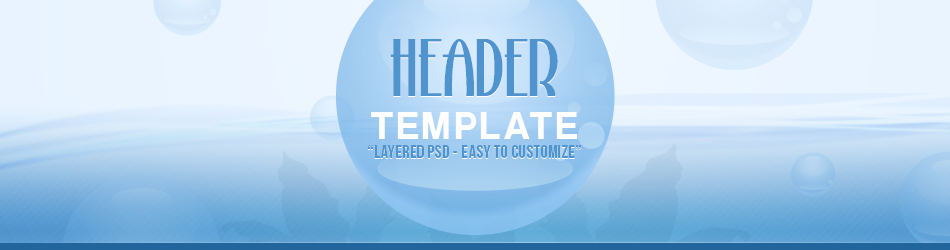
<style>
.page{position:relative;width:950px;height:250px}
.page>*{position:absolute;margin:0}
.t1{font:75.1px "StonyIslandNF";color:#4f94ce}
.t2{font:40.2px "CoolveticaRg-Regular";letter-spacing:0.1em;color:#ffffff}
.t3{font:18px "BebasNeue";letter-spacing:0.02em;color:#4f94ce}
</style>
<div class="page">
<p class="t1" style="left:390px;top:39px;width:168px;height:57px">HEADER</p>
<p class="t2" style="left:371px;top:112px;width:207px;height:27px">TEMPLATE</p>
<p class="t3" style="left:368px;top:145px;width:213px;height:13px">“Layered PSD - Easy to customize”</p>
</div>
